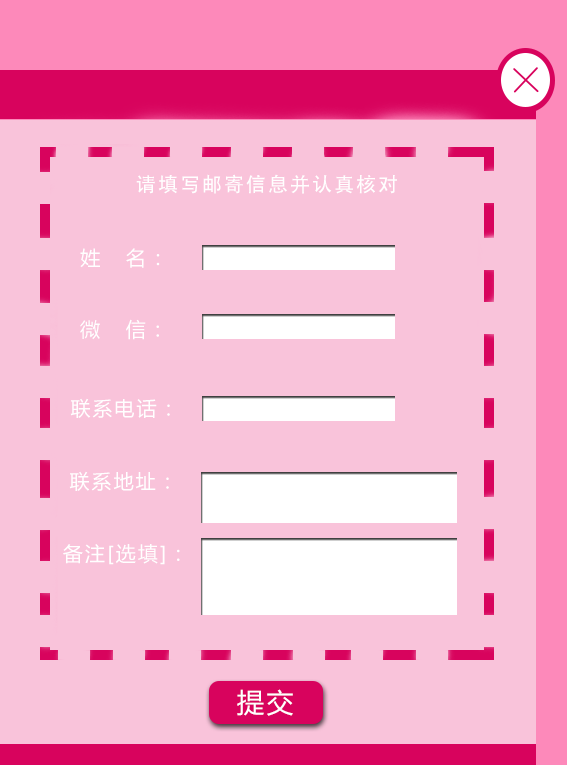
<style>
.page{position:relative;width:567px;height:765px;background:#f9c3da}
.page>*{position:absolute;margin:0}
.t1{font:20px "AdobeHeitiStd-Regular";letter-spacing:0.1em;color:#ffffff;text-transform:uppercase}
.t2{font:20px "MicrosoftYaHei";letter-spacing:0.1em;color:#ffffff;text-transform:uppercase}
.t3{font:27px "MicrosoftYaHei";letter-spacing:0.1em;color:#ffffff;text-transform:uppercase}
</style>
<div class="page">
<p class="t1" style="left:136px;top:174px;width:261px;height:20px">请填写邮寄信息并认真核对</p>
<p class="t2" style="left:80px;top:248px;width:80px;height:20px">姓   名：</p>
<p class="t2" style="left:80px;top:319px;width:79px;height:21px">微   信：</p>
<p class="t2" style="left:70px;top:398px;width:100px;height:20px">联系电话：</p>
<p class="t2" style="left:69px;top:471px;width:100px;height:20px">联系地址：</p>
<p class="t2" style="left:63px;top:544px;width:117px;height:21px">备注[选填]：</p>
<p class="t3" style="left:237px;top:689px;width:56px;height:27px">提交</p>
</div>
